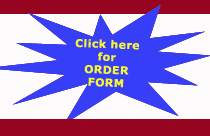
<style>
.page{position:relative;width:210px;height:136px;background:#fdfbfb}
.page>*{position:absolute;margin:0}
.t1{font:10.7px "Verdana-Bold";letter-spacing:0.025em;color:#f7f536;font-weight:bold}
</style>
<div class="page">
<p class="t1" style="left:75px;top:38px;width:64px;height:50px;text-align:center;rotate:2deg">Click here <br>for<br>ORDER <br>FORM</p>
</div>
